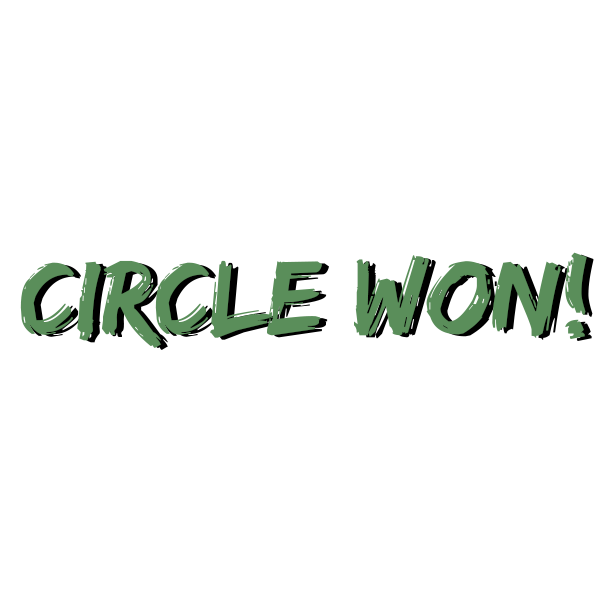
<style>
.page{position:relative;width:600px;height:600px;background:#ffffff}
.page>*{position:absolute;margin:0}
.t1{font:110px "EdoSZ";color:#5a8e5a}
.t2{font:110px "EdoSZ"}
</style>
<div class="page">
<p class="t1" style="left:20px;top:252px;width:567px;height:96px">Circle won!</p>
<p class="t2" style="left:27px;top:254px;width:567px;height:96px">circle won!</p>
</div>
